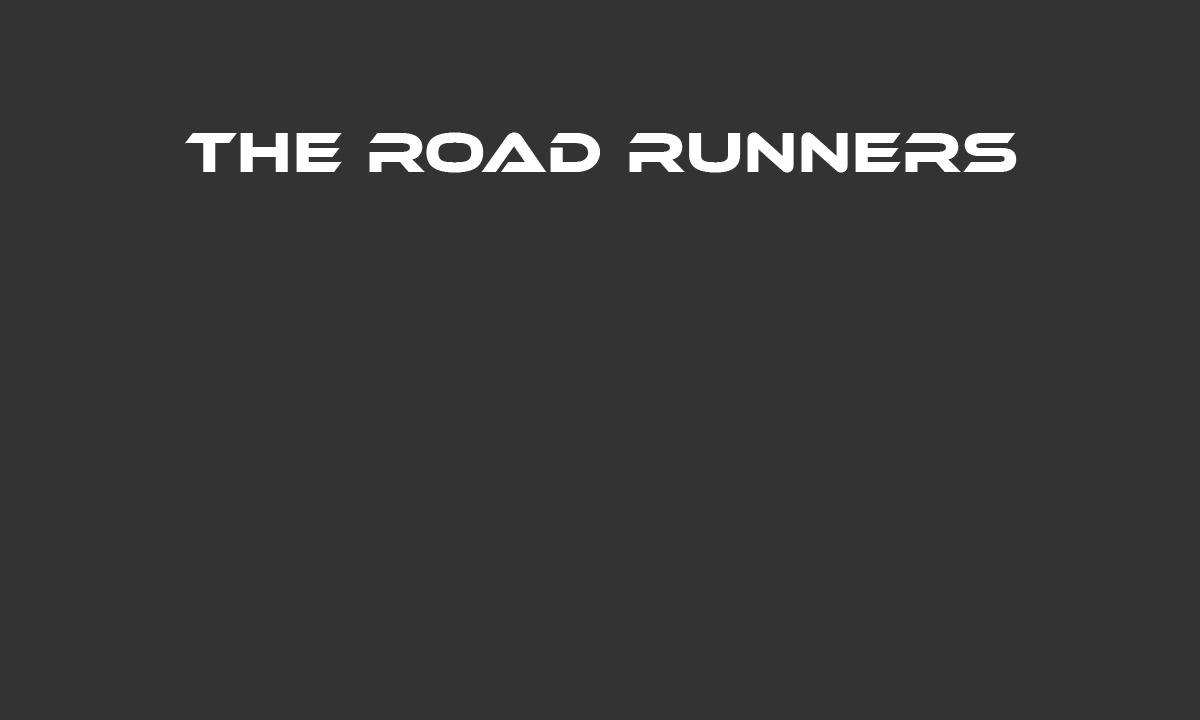
<style>
.page{position:relative;width:1200px;height:720px;background:#333333}
.page>*{position:absolute;margin:0}
.t1{font:57.5px "EthnocentricRg-Regular";letter-spacing:0.02em;color:#ffffff}
</style>
<div class="page">
<p class="t1" style="left:185px;top:132px;width:832px;height:41px">The Road Runners</p>
</div>
